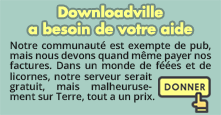
<style>
.page{position:relative;width:221px;height:115px;background:#a8cec3}
.page>*{position:absolute;margin:0}
.t1{font:14px "FuturaLT-Bold";color:#fdff87}
.t2{font:10px/10px "OpenSans-Semibold";color:#1b1b1b}
</style>
<div class="page">
<p class="t1" style="left:28px;top:5px;width:165px;height:30px;text-align:center">Downloadville <br>a besoin de votre aide !</p>
<p class="t2" style="left:9px;top:41px;width:203px;height:29px;text-align:justify">Notre communauté est exempte de pub, mais nous devons quand même payer nos factures. Dans un monde de féées et de</p>
<p class="t2" style="left:9px;top:72px;width:146px;height:31px;text-align:justify">licornes, notre serveur serait gratuit, mais malheurusement sur Terre, tout a un prix.</p>
</div>
